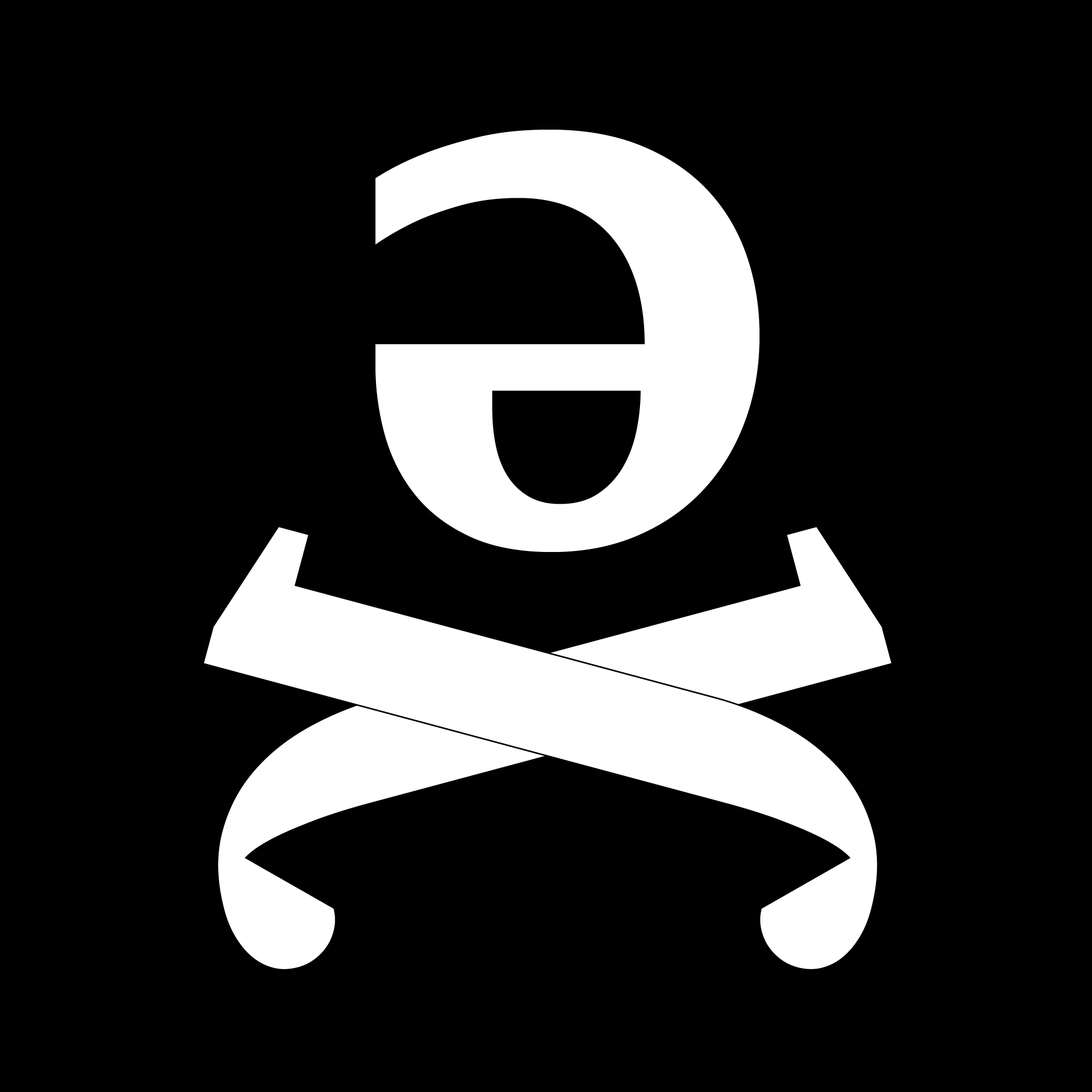
<style>
.page{position:relative;width:1092px;height:1092px;background:#000000}
.page>*{position:absolute;margin:0}
.t1{font:824.5px "CharisSIL-Bold";color:#ffffff}
.t2{font:737.7px "CharisSIL-Bold";color:#ffffff}
</style>
<div class="page">
<p class="t1" style="left:375px;top:130px;width:385px;height:422px">ə</p>
<p class="t2" style="left:204px;top:527px;width:673px;height:442px;rotate:105deg">ɭ</p>
<p class="t2" style="left:218px;top:527px;width:674px;height:442px;rotate:75deg">ɭ</p>
</div>
